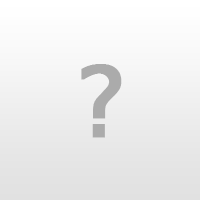
<style>
.page{position:relative;width:200px;height:200px}
.page>*{position:absolute;margin:0}
.t1{font:96px "Menlo-Regular";color:#ababab;font-weight:bold}
</style>
<div class="page">
<p class="t1" style="left:81px;top:64px;width:41px;height:74px">?</p>
</div>
